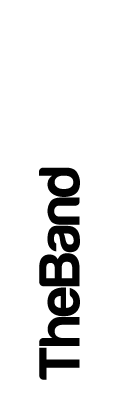
<style>
.page{position:relative;width:120px;height:400px;background:#ffffff}
.page>*{position:absolute;margin:0}
.t1{font:60px "Harabara-Bold";color:#010101}
</style>
<div class="page">
<p class="t1" style="left:39px;top:167px;width:41px;height:213px;rotate:-90deg">TheBand</p>
</div>
